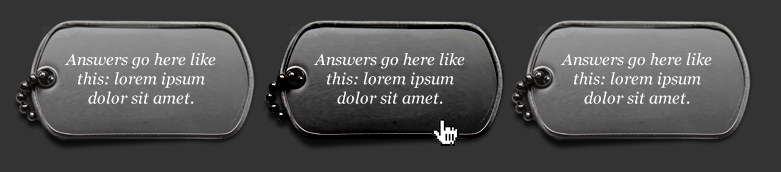
<style>
.page{position:relative;width:781px;height:172px;background:#333333}
.page>*{position:absolute;margin:0}
.t1{font:16px/19.2px "Georgia-Italic";color:#ffffff}
</style>
<div class="page">
<p class="t1" style="left:64px;top:53px;width:152px;height:51px;text-align:center">Answers go here like this: lorem ipsum dolor sit amet.</p>
<p class="t1" style="left:313px;top:53px;width:152px;height:51px;text-align:center">Answers go here like this: lorem ipsum dolor sit amet.</p>
<p class="t1" style="left:560px;top:53px;width:152px;height:51px;text-align:center">Answers go here like this: lorem ipsum dolor sit amet.</p>
</div>
